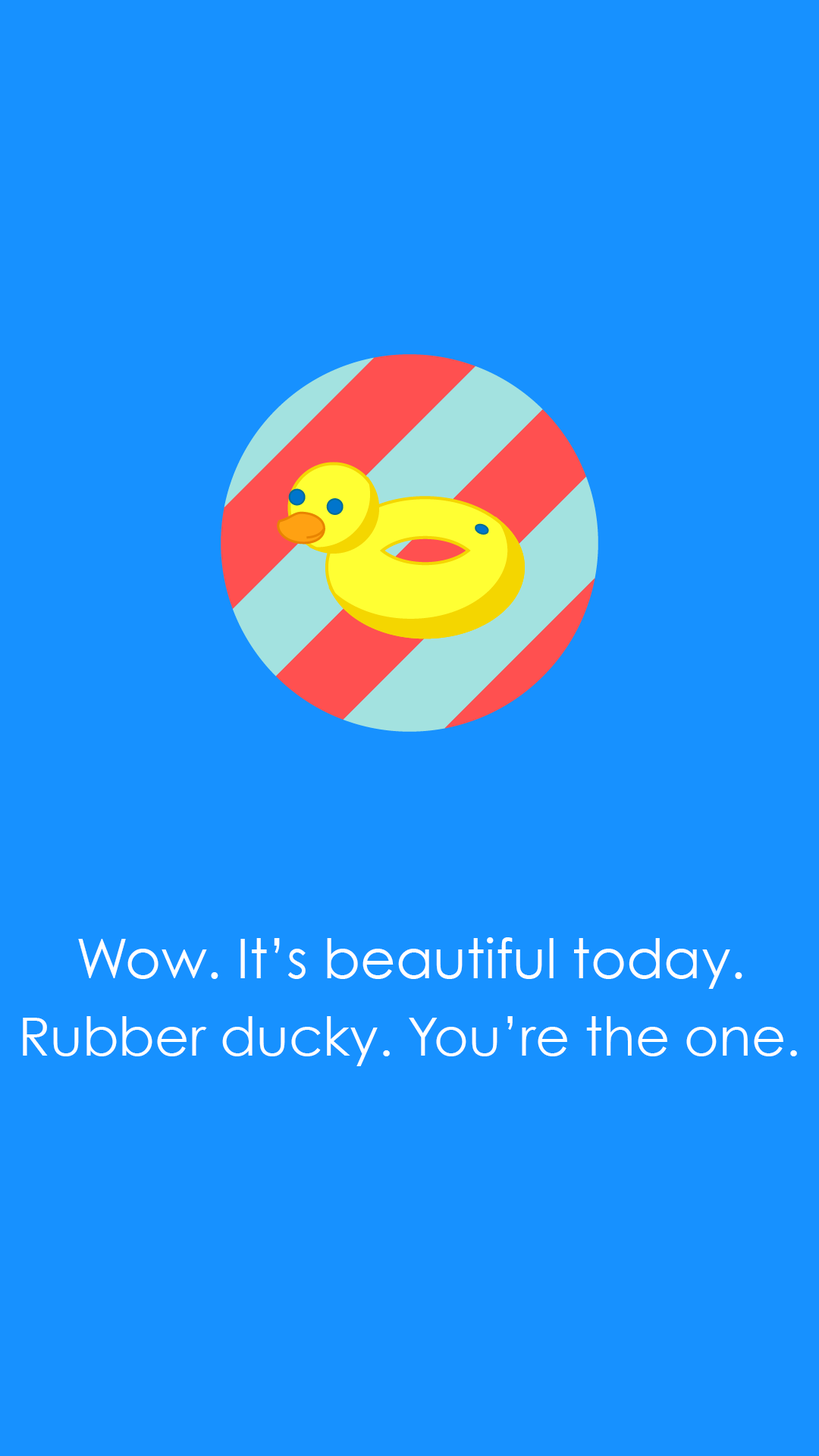
<style>
.page{position:relative;width:819px;height:1456px;background:#1791ff}
.page>*{position:absolute;margin:0}
.t1{font:54.6px "CenturyGothic";color:#ffffff}
.t2{font:53.1px "CenturyGothic";color:#ffffff}
</style>
<div class="page">
<p class="t1" style="left:78px;top:937px;width:664px;height:52px">Wow. It’s beautiful today.</p>
<p class="t2" style="left:23px;top:1016px;width:774px;height:50px">Rubber ducky. You’re the one.</p>
</div>
